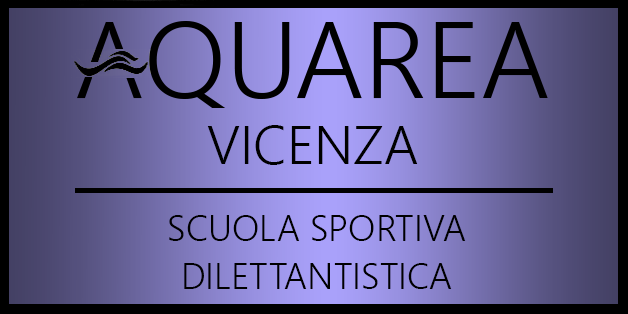
<style>
.page{position:relative;width:628px;height:314px}
.page>*{position:absolute;margin:0}
.t1{font:54px "SegoeUI-Semilight";color:#000000}
.t2{font:36px/48px "SegoeUI-Semilight";color:#000000}
</style>
<div class="page">
<p class="t1" style="left:207px;top:125px;width:211px;height:40px">VICENZA</p>
<p class="t2" style="left:169px;top:215px;width:297px;height:74px;text-align:center">SCUOLA SPORTIVA<br>DILETTANTISTICA</p>
</div>
